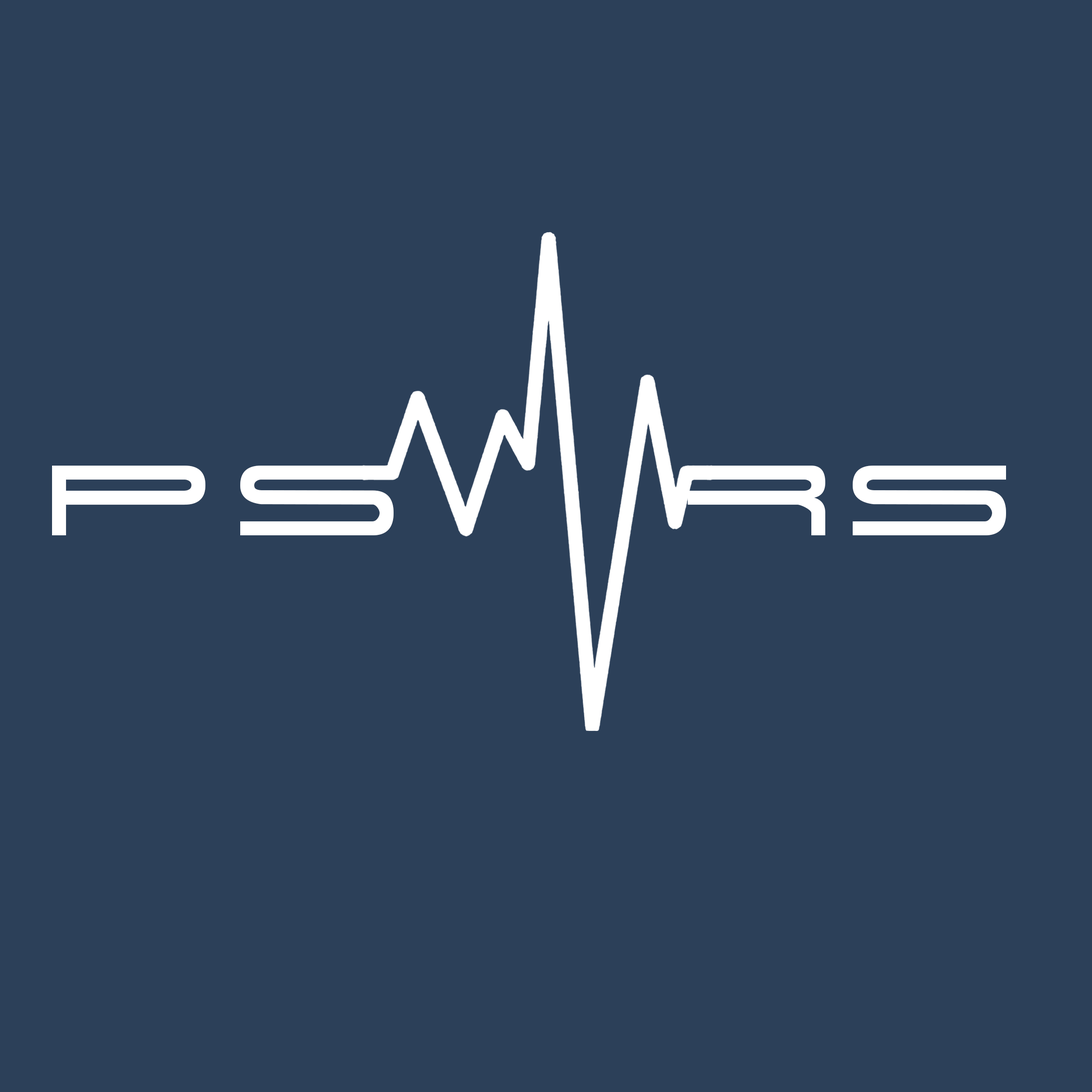
<style>
.page{position:relative;width:1092px;height:1092px;background:#2c4059}
.page>*{position:absolute;margin:0}
.t1{font:139.4px "914-SOLID";letter-spacing:0.15em;color:#ffffff}
</style>
<div class="page">
<p class="t1" style="left:52px;top:466px;width:342px;height:69px">PS</p>
<p class="t1" style="left:853px;top:466px;width:153px;height:69px">S</p>
</div>
